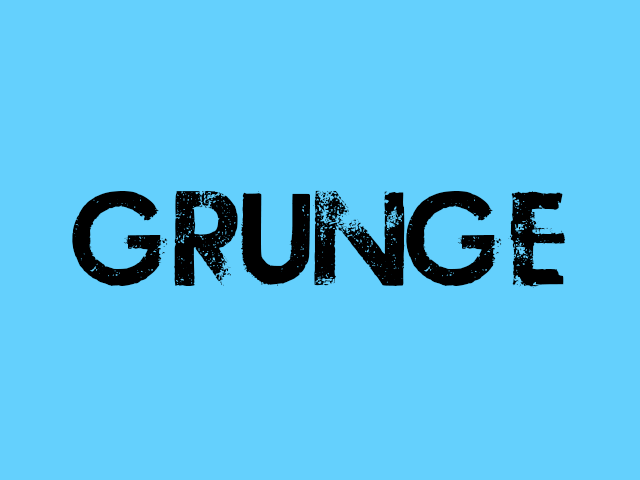
<style>
.page{position:relative;width:640px;height:480px;background:#64d0fd}
.page>*{position:absolute;margin:0}
.t1{font:132px "TOSCAZERO";color:#000000}
</style>
<div class="page">
<p class="t1" style="left:72px;top:190px;width:494px;height:98px">GRUNGE</p>
</div>
